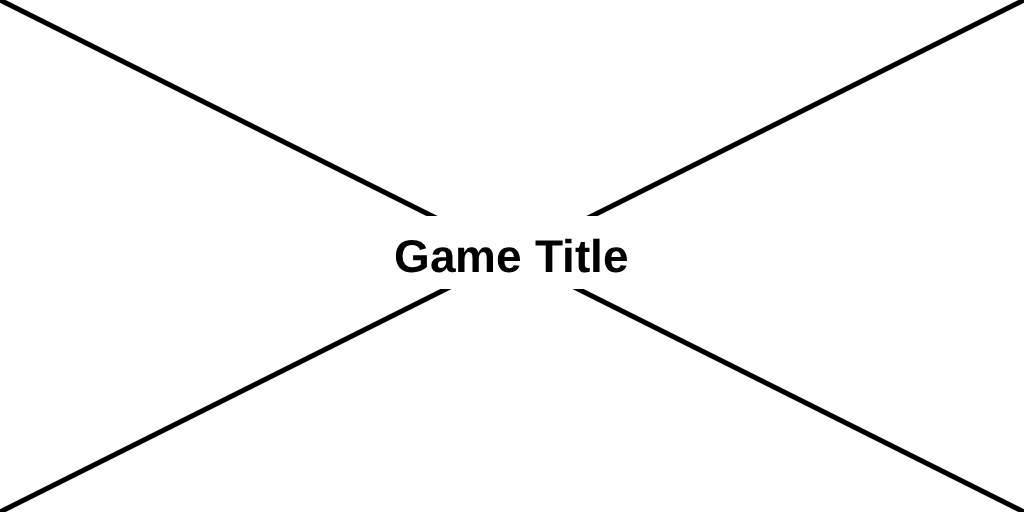
<style>
.page{position:relative;width:1024px;height:512px;background:#ffffff}
.page>*{position:absolute;margin:0}
.t1{font:46px "Helvetica-Bold";color:#000000}
</style>
<div class="page">
<p class="t1" style="left:395px;top:238px;width:232px;height:35px">Game Title</p>
</div>
